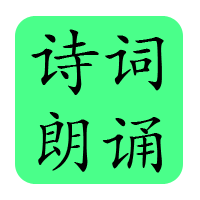
<style>
.page{position:relative;width:200px;height:200px;background:#4aff8a}
.page>*{position:absolute;margin:0}
.t1{font:72px "STKaiti";color:#000000}
</style>
<div class="page">
<p class="t1" style="left:31px;top:29px;width:133px;height:66px">诗词</p>
<p class="t1" style="left:38px;top:112px;width:124px;height:61px">朗诵</p>
</div>
